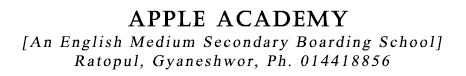
<style>
.page{position:relative;width:466px;height:76px;background:#ffffff}
.page>*{position:absolute;margin:0}
.t1{font:20.8px "Kokila";letter-spacing:0.1em;color:#000000;font-style:italic}
</style>
<div class="page">
<p class="t1" style="left:22px;top:35px;width:420px;height:16px">[An English Medium Secondary Boarding School]</p>
<p class="t1" style="left:74px;top:54px;width:317px;height:16px">Ratopul, Gyaneshwor, Ph. 014418856</p>
</div>
